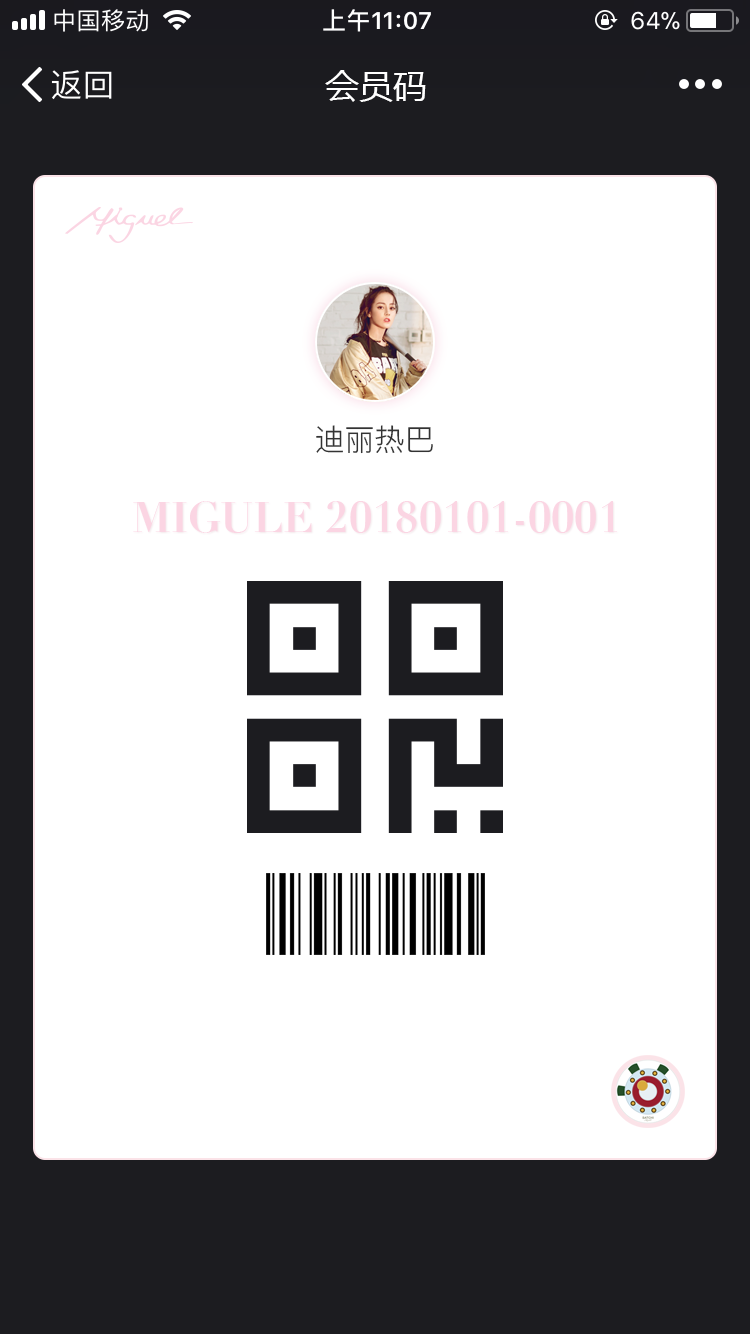
<style>
.page{position:relative;width:750px;height:1334px;background:#ffffff}
.page>*{position:absolute;margin:0}
.t1{font:34px "MicrosoftYaHei";color:#ffffff}
.t2{font:30px "PingFang-SC-Regular";color:#333333}
.t3{font:42px "Didot-Bold";color:#fbd5e3}
</style>
<div class="page">
<p class="t1" style="left:325px;top:70px;width:101px;height:32px">会员码</p>
<p class="t2" style="left:316px;top:425px;width:117px;height:29px">迪丽热巴</p>
<p class="t3" style="left:133px;top:501px;width:484px;height:32px">MIGULE 20180101-0001</p>
</div>
